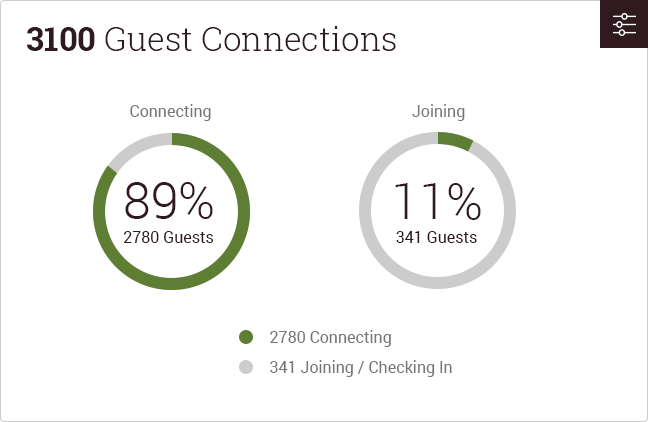
<style>
.page{position:relative;width:648px;height:422px;background:#ffffff}
.page>*{position:absolute;margin:0}
.t1{font:33px "RobotoSlab-Light";color:#2f1b1f}
.t2{font:33px "RobotoSlab-Bold";color:#2f1b1f}
.t3{font:16px "Roboto-Regular";color:#767676}
.t4{font:50px "Roboto-Light";color:#2f1b1f}
.t5{font:16px "Roboto-Regular";color:#2f1b1f}
</style>
<div class="page">
<p class="t1" style="left:26px;top:26px;width:370px;height:25px"><span class="t2">3100</span> Guest Connections</p>
<p class="t3" style="left:130px;top:104px;width:81px;height:17px">Connecting</p>
<p class="t3" style="left:412px;top:104px;width:53px;height:17px">Joining</p>
<p class="t4" style="left:125px;top:182px;width:88px;height:37px">89%</p>
<p class="t4" style="left:395px;top:183px;width:86px;height:37px">11%</p>
<p class="t5" style="left:124px;top:231px;width:90px;height:12px">2780 Guests</p>
<p class="t5" style="left:396px;top:231px;width:81px;height:12px">341 Guests</p>
<p class="t3" style="left:270px;top:330px;width:121px;height:17px">2780 Connecting</p>
<p class="t3" style="left:270px;top:360px;width:182px;height:17px">341 Joining / Checking In</p>
</div>
